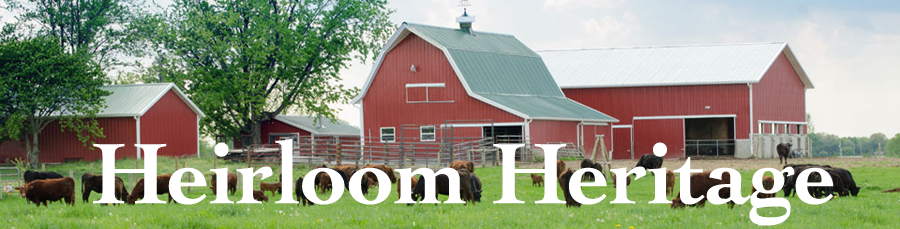
<style>
.page{position:relative;width:900px;height:229px}
.page>*{position:absolute;margin:0}
.t1{font:90px "Cochin-Bold";color:#ffffff}
</style>
<div class="page">
<p class="t1" style="left:93px;top:138px;width:741px;height:88px">Heirloom Heritage</p>
</div>
